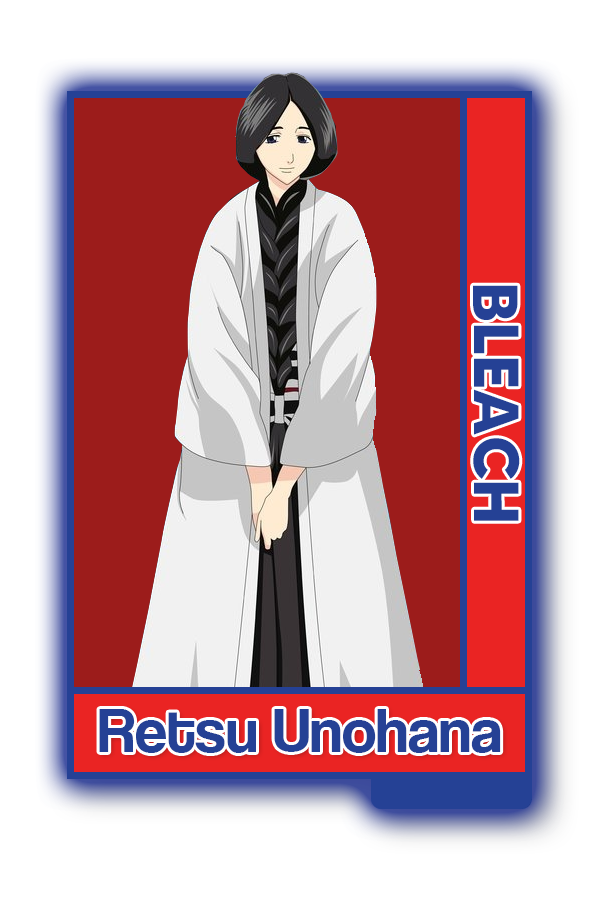
<style>
.page{position:relative;width:600px;height:900px;background:#ffffff}
.page>*{position:absolute;margin:0}
.t1{font:63.6px "MADETOMMY-Bold";color:#254195}
.t2{font:63.6px "CoolveticaRg-Regular";color:#254195}
</style>
<div class="page">
<p class="t1" style="left:473px;top:285px;width:47px;height:236px;rotate:90deg">BLEACH</p>
<p class="t2" style="left:99px;top:709px;width:402px;height:44px">Retsu Unohana</p>
</div>
